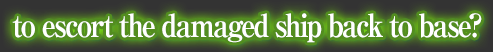
<style>
.page{position:relative;width:493px;height:52px}
.page>*{position:absolute;margin:0}
.t1{font:32px "RyuminPro-ExBold";letter-spacing:-0.08em;color:#ffffff;scale:0.9 1}
</style>
<div class="page">
<p class="t1" style="left:12px;top:13px;width:470px;height:30px">to escort the damaged ship back to base?</p>
</div>
